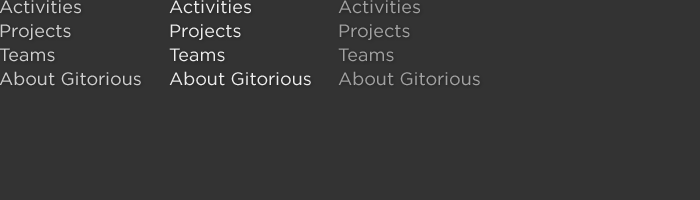
<style>
.page{position:relative;width:700px;height:200px;background:#333333}
.page>*{position:absolute;margin:0}
.t1{font:18px/24px "GothamHTF-Book";color:#cfcfcf}
.t2{font:18px/24px "GothamHTF-Book";color:#eeeeee}
.t3{font:18px/24px "GothamHTF-Book";color:#a3a3a3}
</style>
<div class="page">
<p class="t1" style="left:0px;top:0px;width:141px;height:86px">Activities<br>Projects<br>Teams<br>About Gitorious</p>
<p class="t2" style="left:169px;top:0px;width:142px;height:86px">Activities<br>Projects<br>Teams<br>About Gitorious</p>
<p class="t3" style="left:338px;top:0px;width:142px;height:86px">Activities<br>Projects<br>Teams<br>About Gitorious</p>
</div>
